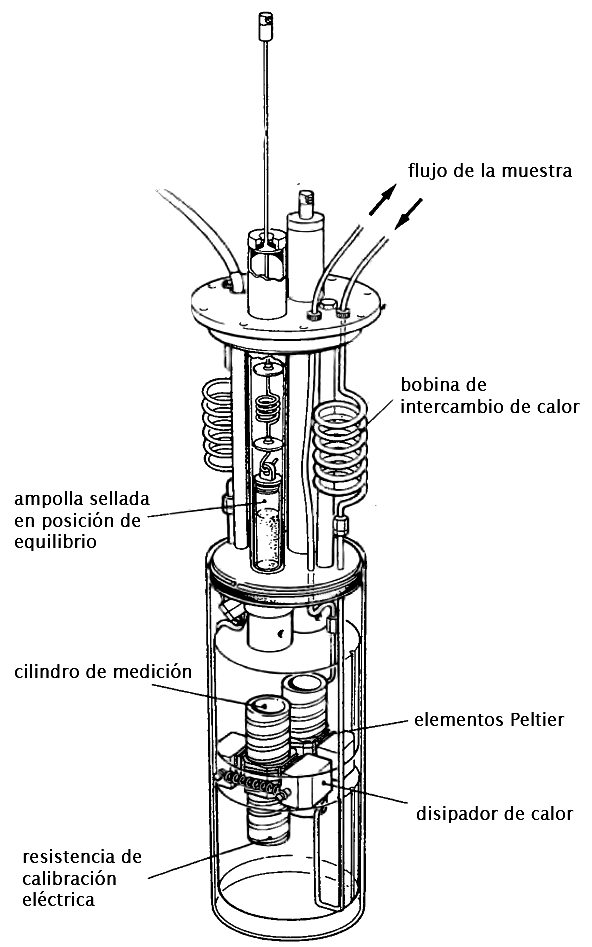
<style>
.page{position:relative;width:592px;height:947px;background:#ffffff}
.page>*{position:absolute;margin:0}
.t1{font:18px "LucidaSans";color:#000000}
</style>
<div class="page">
<p class="t1" style="left:408px;top:163px;width:165px;height:17px">flujo de la muestra</p>
<p class="t1" style="left:401px;top:377px;width:179px;height:36px">bobina de<br>intercambio de calor</p>
<p class="t1" style="left:14px;top:491px;width:136px;height:60px">ampolla sellada<br>en posición de<br>equilibrio</p>
<p class="t1" style="left:15px;top:663px;width:176px;height:15px">cilindro de medición</p>
<p class="t1" style="left:414px;top:712px;width:151px;height:14px">elementos Peltier</p>
<p class="t1" style="left:416px;top:806px;width:158px;height:17px">disipador de calor</p>
<p class="t1" style="left:22px;top:849px;width:120px;height:57px">resistencia de <br>calibración<br>eléctrica</p>
</div>
